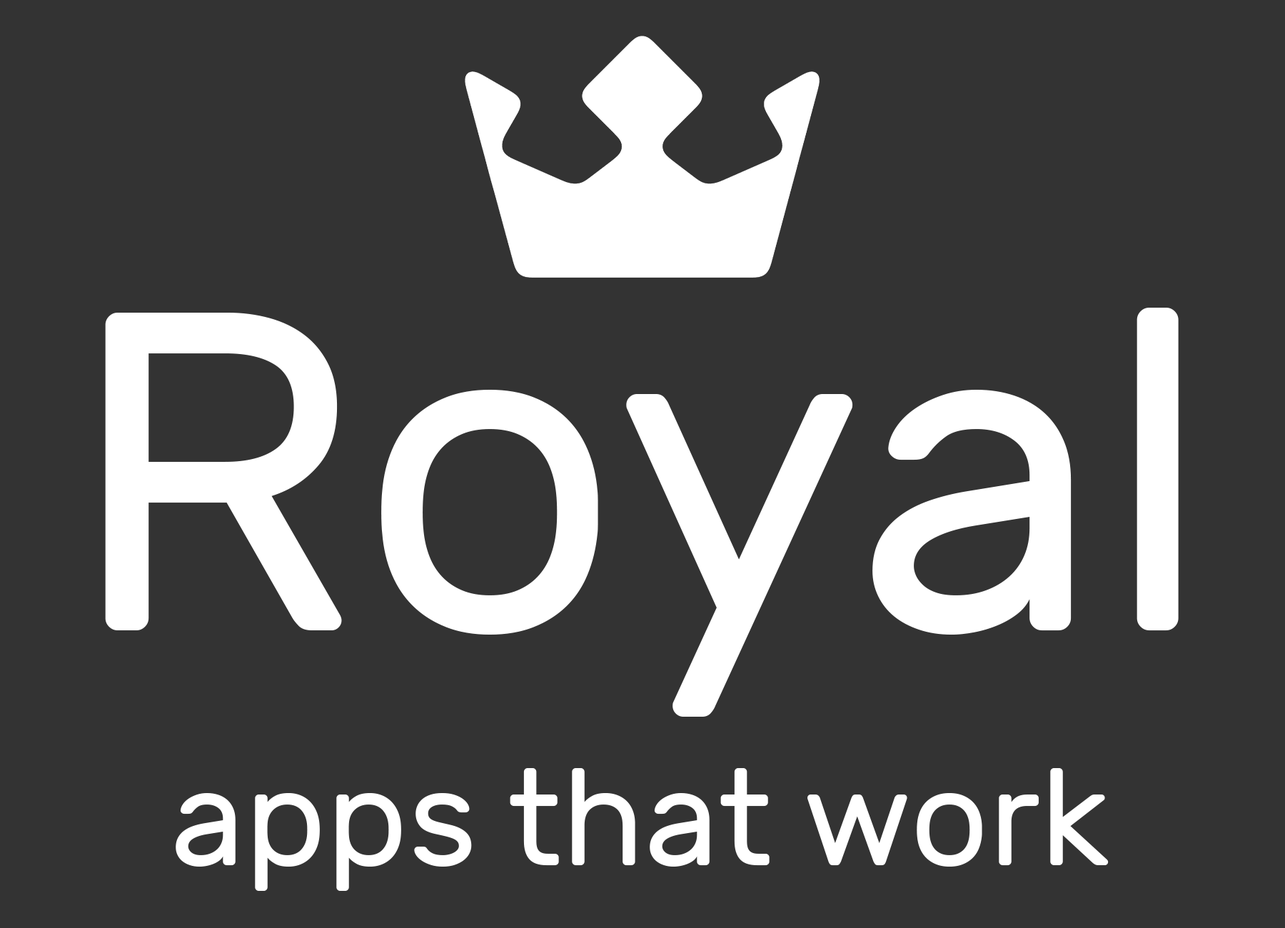
<style>
.page{position:relative;width:1285px;height:928px;background:#333333}
.page>*{position:absolute;margin:0}
.t1{font:454.1px "Rubik-Regular";color:#ffffff}
.t2{font:136.2px "Rubik-Regular";color:#ffffff}
</style>
<div class="page">
<p class="t1" style="left:105px;top:308px;width:1074px;height:409px">Royal</p>
<p class="t2" style="left:176px;top:768px;width:933px;height:123px">apps that work</p>
</div>
